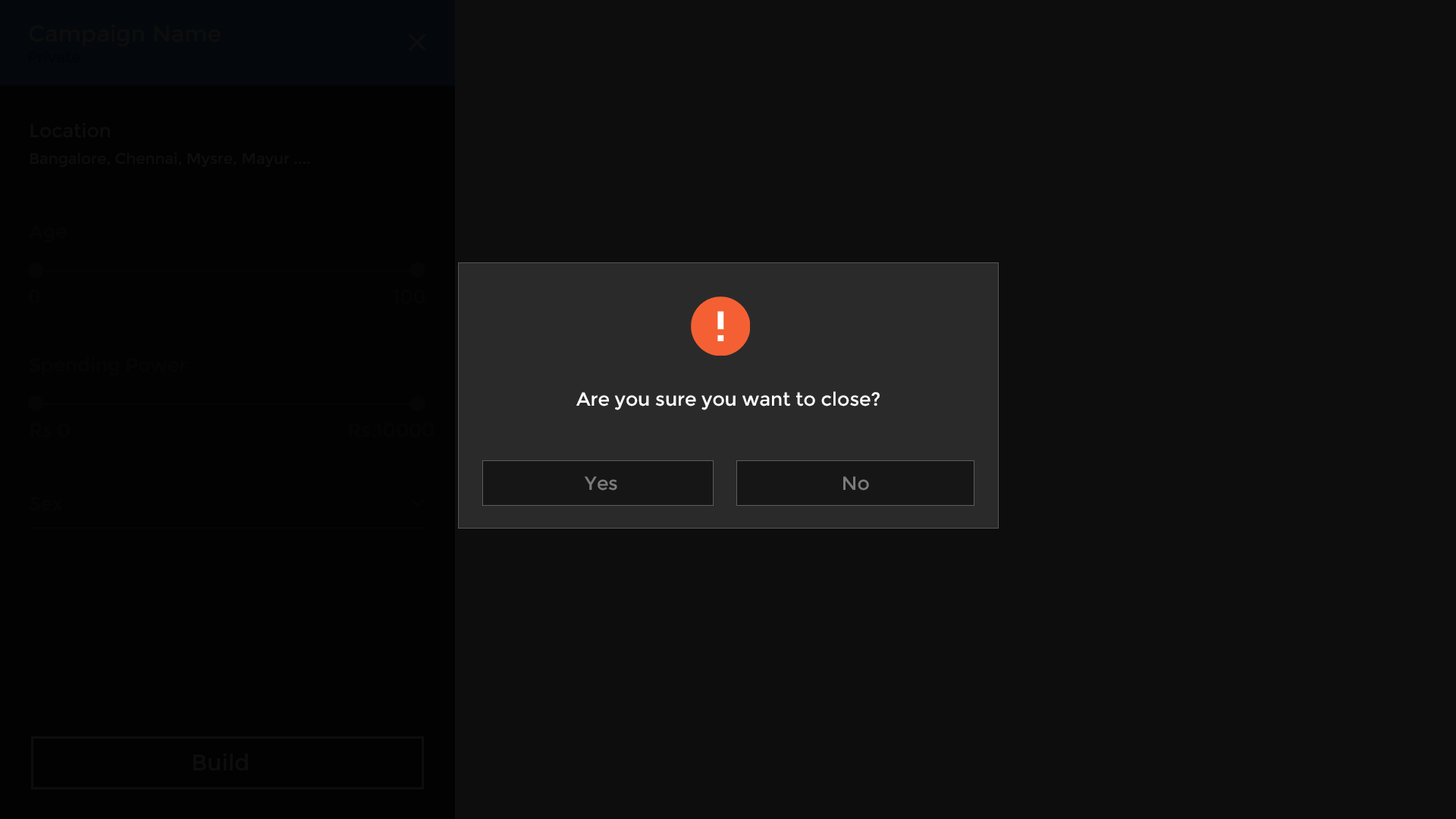
<style>
.page{position:relative;width:1456px;height:819px;background:#0d0d0d}
.page>*{position:absolute;margin:0}
.t1{font:22.7px "Montserrat-Regular";color:#0d0d0d}
.t2{font:15.2px "Montserrat-Regular";color:#000000}
.t3{font:19px "Montserrat-Regular";color:#0d0d0d}
.t4{font:15.2px "Montserrat-Regular";color:#0d0d0d}
.t5{font:19px "Montserrat-Regular";color:#ffffff}
.t6{font:19px "Montserrat-Regular";color:#7b7b7b}
</style>
<div class="page">
<p class="t1" style="left:29px;top:24px;width:192px;height:23px">Campaign Name</p>
<p class="t2" style="left:29px;top:50px;width:51px;height:13px;opacity:0.6">Private</p>
<p class="t3" style="left:30px;top:123px;width:80px;height:15px">Location</p>
<p class="t4" style="left:30px;top:152px;width:280px;height:16px">Bangalore, Chennai, Mysre, Mayur ....</p>
<p class="t5" style="left:576px;top:391px;width:304px;height:19px">Are you sure you want to close?</p>
<p class="t6" style="left:584px;top:476px;width:33px;height:15px">Yes</p>
<p class="t6" style="left:843px;top:476px;width:26px;height:15px">No</p>
<p class="t1" style="left:193px;top:753px;width:55px;height:18px">Build</p>
</div>
